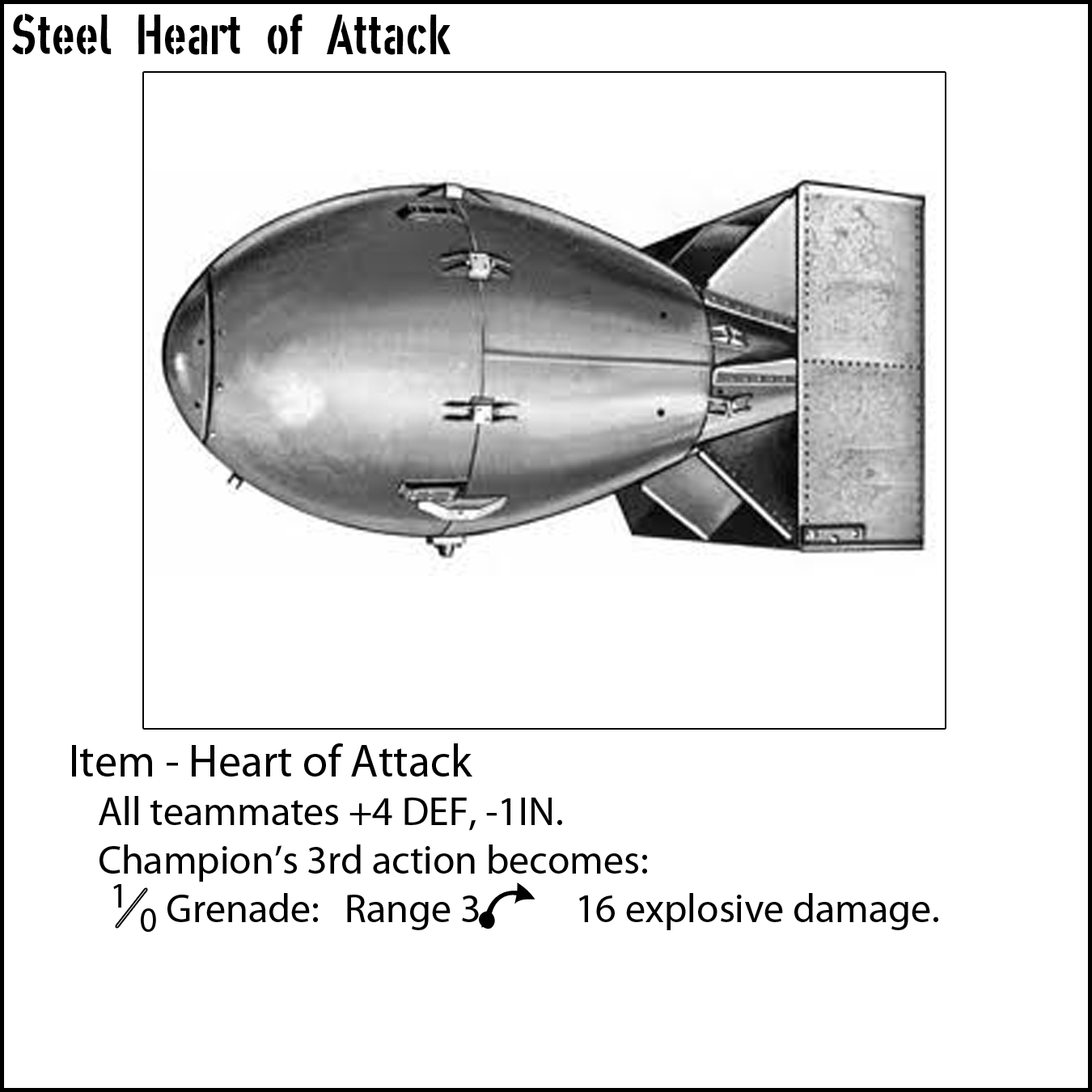
<style>
.page{position:relative;width:1092px;height:1092px;background:#ffffff}
.page>*{position:absolute;margin:0}
.t1{font:55.6px "XXIISTRAIGHT-ARMY";color:#000000}
.t2{font:40.4px "MyriadPro-Regular";color:#000000}
.t3{font:45.5px "MyriadPro-Regular";color:#000000}
.t4{font:35.4px "MyriadPro-Regular";color:#000000}
</style>
<div class="page">
<p class="t1" style="left:12px;top:14px;width:439px;height:41px">Steel Heart of Attack</p>
<p class="t2" style="left:72px;top:743px;width:866px;height:187px"><span class="t3">Item - Heart of Attack<br></span> All teammates +4 DEF, -1IN.<br> Champion’s 3rd action becomes:<br>         Grenade:   Range 3,          16 explosive damage.</p>
<p class="t4" style="left:113px;top:884px;width:8px;height:24px">1</p>
<p class="t4" style="left:141px;top:908px;width:15px;height:24px">0</p>
</div>
